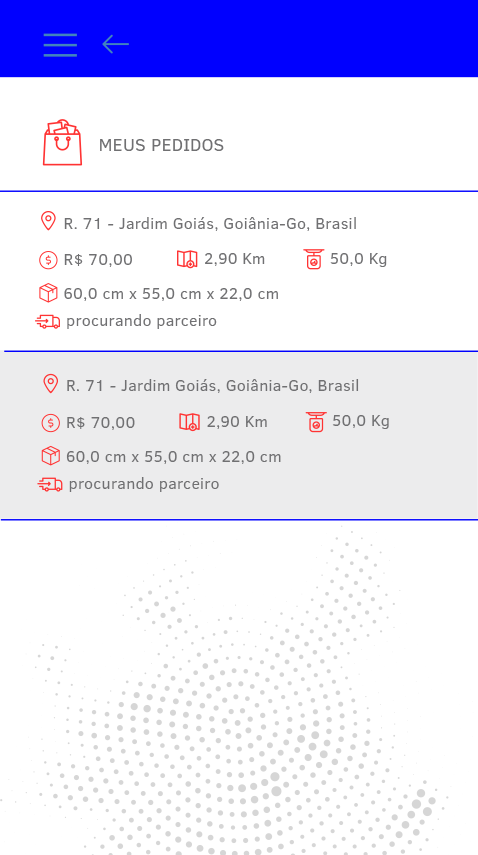
<style>
.page{position:relative;width:478px;height:855px;background:#ffffff}
.page>*{position:absolute;margin:0}
.t1{font:17.5px "ClearSans";letter-spacing:0.02em;color:#707072}
.t2{font:15.8px "ClearSans";letter-spacing:0.02em;color:#707072}
</style>
<div class="page">
<p class="t1" style="left:100px;top:139px;width:124px;height:12px">MEUS PEDIDOS</p>
<p class="t2" style="left:64px;top:217px;width:292px;height:14px">R. 71 - Jardim Goiás, Goiânia-Go, Brasil</p>
<p class="t2" style="left:64px;top:254px;width:68px;height:13px">R$ 70,00</p>
<p class="t2" style="left:205px;top:253px;width:60px;height:13px">2,90 Km</p>
<p class="t2" style="left:330px;top:253px;width:57px;height:14px">50,0 Kg</p>
<p class="t2" style="left:64px;top:288px;width:214px;height:13px">60,0 cm x 55,0 cm x 22,0 cm</p>
<p class="t2" style="left:67px;top:314px;width:150px;height:15px">procurando parceiro</p>
<p class="t2" style="left:67px;top:379px;width:292px;height:14px">R. 71 - Jardim Goiás, Goiânia-Go, Brasil</p>
<p class="t2" style="left:67px;top:417px;width:68px;height:13px">R$ 70,00</p>
<p class="t2" style="left:207px;top:416px;width:60px;height:13px">2,90 Km</p>
<p class="t2" style="left:332px;top:415px;width:57px;height:14px">50,0 Kg</p>
<p class="t2" style="left:66px;top:451px;width:215px;height:13px">60,0 cm x 55,0 cm x 22,0 cm</p>
<p class="t2" style="left:69px;top:477px;width:150px;height:15px">procurando parceiro</p>
</div>
